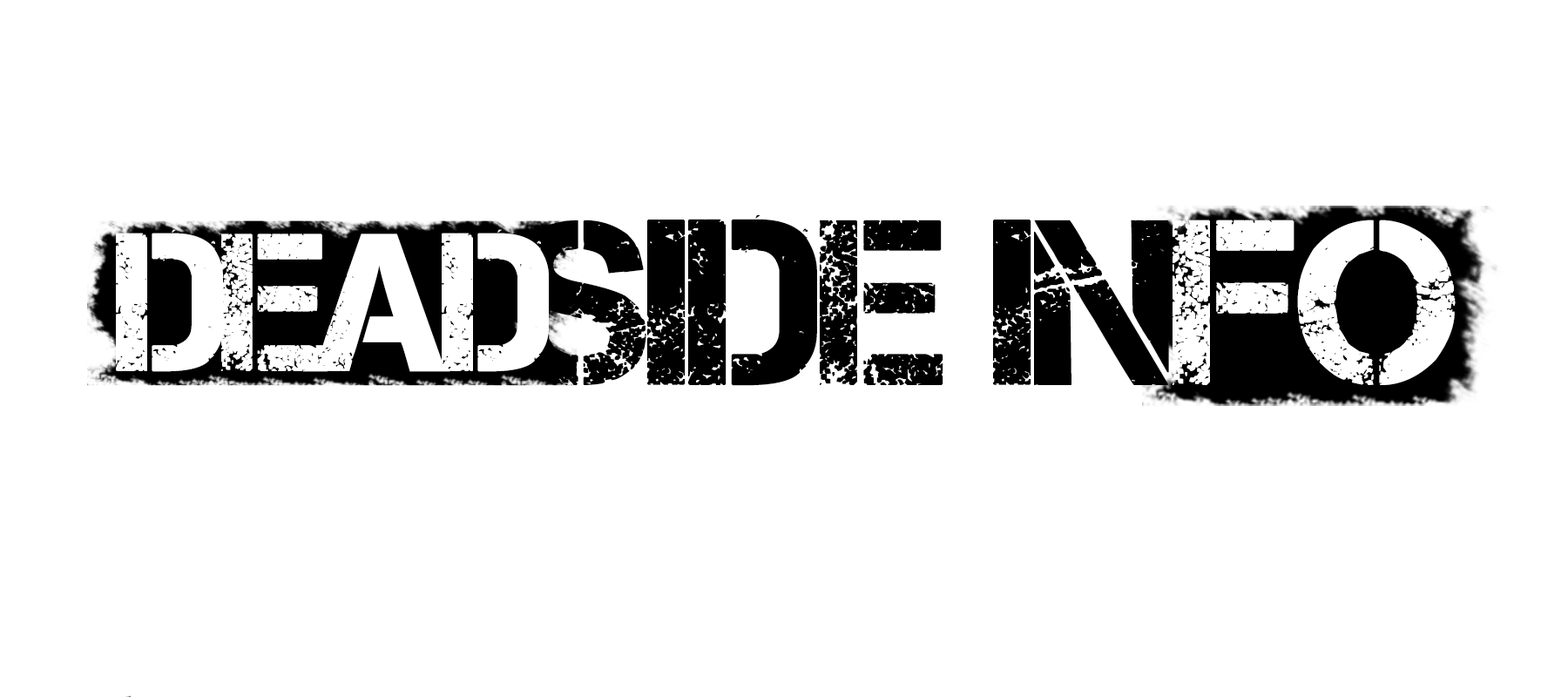
<style>
.page{position:relative;width:1568px;height:697px;background:#ffffff}
.page>*{position:absolute;margin:0}
.t1{font:235.4px "Captureit";letter-spacing:-0.02em;color:#000000;text-transform:uppercase}
.t2{font:195.8px "Captureit";letter-spacing:-0.04em;color:#ffffff;text-transform:uppercase}
</style>
<div class="page">
<p class="t1" style="left:512px;top:215px;width:431px;height:171px">side</p>
<p class="t2" style="left:116px;top:229px;width:433px;height:143px">Dead</p>
</div>
